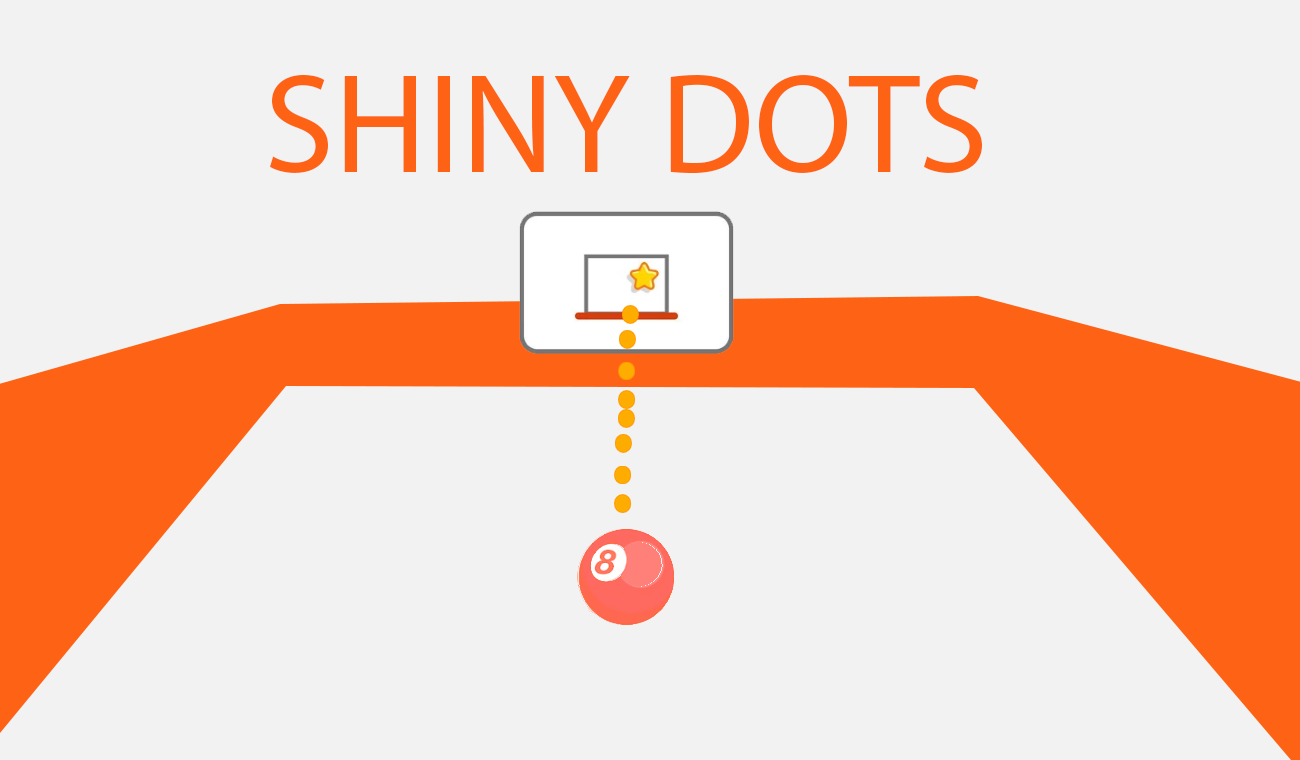
<style>
.page{position:relative;width:1300px;height:760px;background:#f2f2f2}
.page>*{position:absolute;margin:0}
.t1{font:142px "MyriadPro-Regular";color:#fe6315}
</style>
<div class="page">
<p class="t1" style="left:270px;top:75px;width:712px;height:98px">SHINY DOTS</p>
</div>
